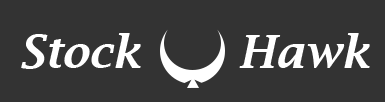
<style>
.page{position:relative;width:385px;height:102px;background:#333333}
.page>*{position:absolute;margin:0}
.t1{font:45px "LucidaBright-DemiItalic";color:#ffffff}
</style>
<div class="page">
<p class="t1" style="left:21px;top:33px;width:349px;height:36px">Stock       Hawk</p>
</div>
